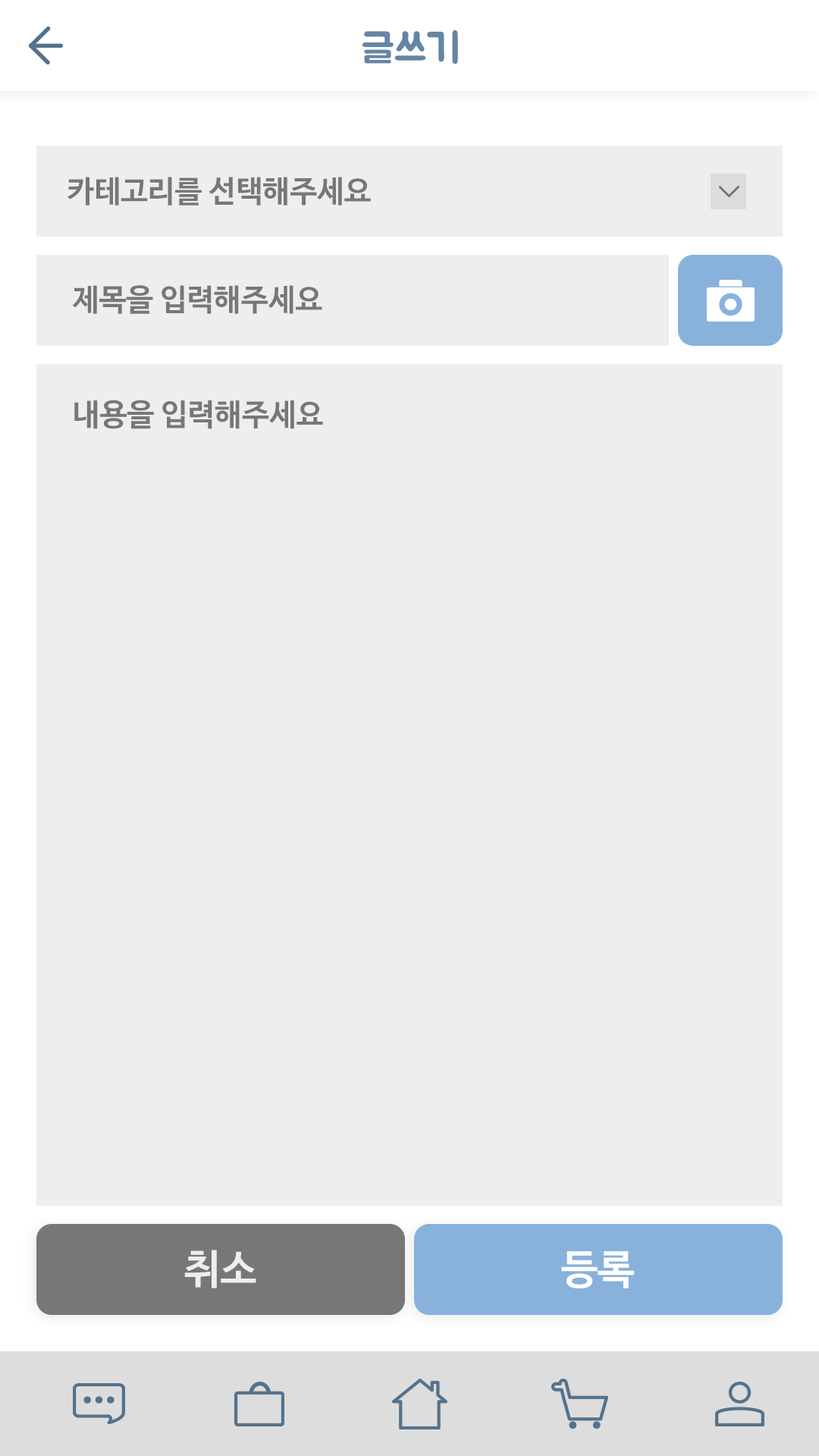
<style>
.page{position:relative;width:819px;height:1456px;background:#eeeeee}
.page>*{position:absolute;margin:0}
.t1{font:40.9px "BMJUA";color:#6585a5}
.t2{font:30.3px "NanumBarunGothicBold";color:#777777}
.t3{font:40.9px "NanumBarunGothicBold";color:#eeeeee}
.t4{font:40.9px "NanumBarunGothicBold";color:#ffffff}
</style>
<div class="page">
<p class="t1" style="left:362px;top:30px;width:96px;height:34px">글쓰기</p>
<p class="t2" style="left:67px;top:177px;width:304px;height:29px">카테고리를 선택해주세요</p>
<p class="t2" style="left:72px;top:285px;width:250px;height:29px">제목을 입력해주세요</p>
<p class="t2" style="left:74px;top:400px;width:249px;height:29px">내용을 입력해주세요</p>
<p class="t3" style="left:184px;top:1250px;width:72px;height:38px">취소</p>
<p class="t4" style="left:561px;top:1251px;width:73px;height:37px">등록</p>
</div>
